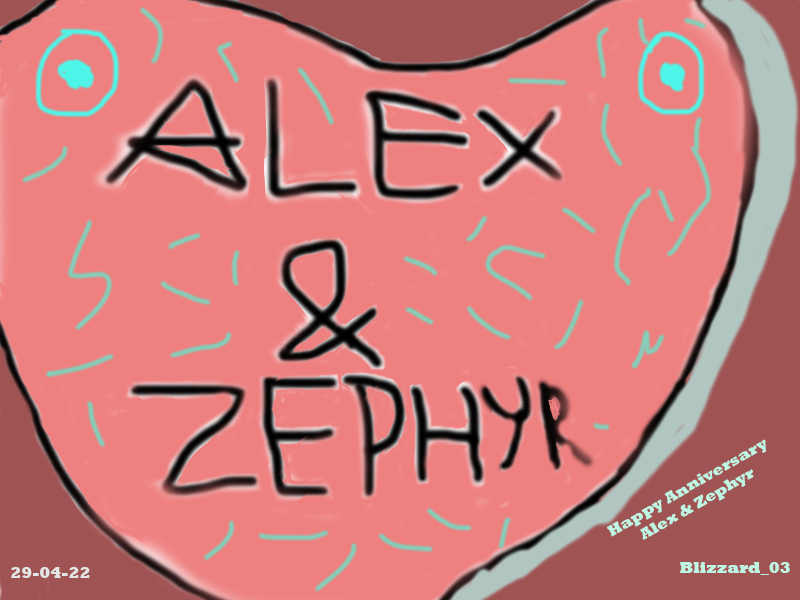
<style>
.page{position:relative;width:800px;height:600px;background:#ee8080}
.page>*{position:absolute;margin:0}
.t1{font:16px "Rockwell-ExtraBold";color:#bff6e3}
.t2{font:16px "Rockwell-ExtraBold";color:#e2e6e5}
</style>
<div class="page">
<p class="t1" style="left:606px;top:439px;width:160px;height:101px;text-align:center;rotate:-30deg">Happy Anniversary<br>Alex &amp; Zephyr</p>
<p class="t2" style="left:11px;top:567px;width:79px;height:11px">29-04-22</p>
<p class="t1" style="left:680px;top:562px;width:110px;height:13px">Blizzard_03</p>
</div>
